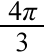
<style>
.page{position:relative;width:44px;height:52px;background:#ffffff}
.page>*{position:absolute;margin:0}
.t1{font:28px "TimesNewRomanPSMT";color:#000000}
.t2{font:28px "TimesNewRomanPS-ItalicMT";color:#000000}
</style>
<div class="page">
<p class="t1" style="left:8px;top:1px;width:30px;height:20px">4<span class="t2">π</span></p>
<p class="t1" style="left:16px;top:32px;width:11px;height:20px">3</p>
</div>
